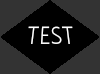
<style>
.page{position:relative;width:100px;height:74px;background:#333333}
.page>*{position:absolute;margin:0}
.t1{font:23.9px "SegoeUI-Light";color:#ffffff}
</style>
<div class="page">
<p class="t1" style="left:28px;top:26px;width:45px;height:18px">TEST</p>
</div>
